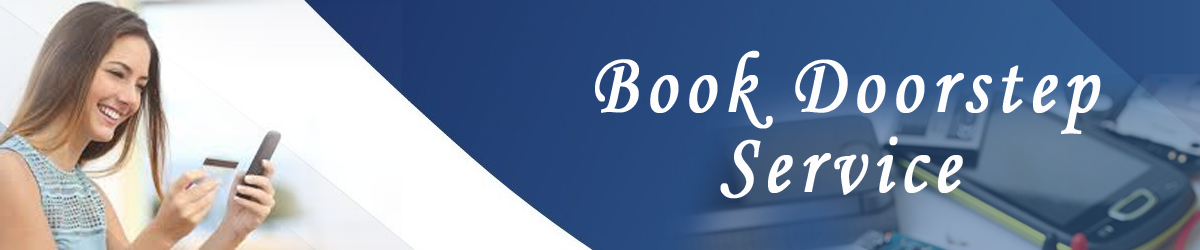
<style>
.page{position:relative;width:1200px;height:250px}
.page>*{position:absolute;margin:0}
.t1{font:87.8px/80px "MonotypeCorsiva";letter-spacing:0.1em;color:#fdfdfd;font-weight:bold;scale:0.84 1}
</style>
<div class="page">
<p class="t1" style="left:595px;top:50px;width:506px;height:149px">Book Doorstep<br>     Service</p>
</div>
